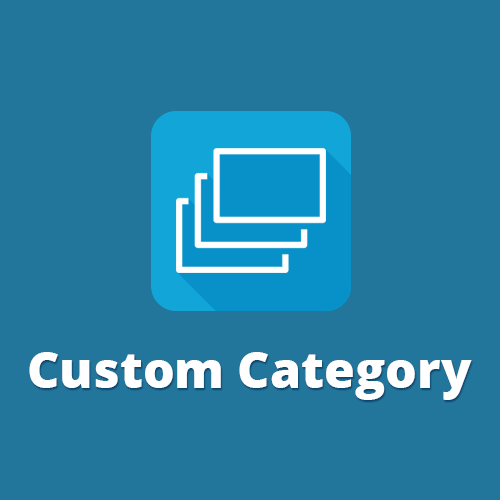
<style>
.page{position:relative;width:500px;height:500px;background:#22759b}
.page>*{position:absolute;margin:0}
.t1{font:50px "OpenSans-Extrabold";color:#ffffff}
</style>
<div class="page">
<p class="t1" style="left:29px;top:352px;width:443px;height:48px">Custom Category</p>
</div>
